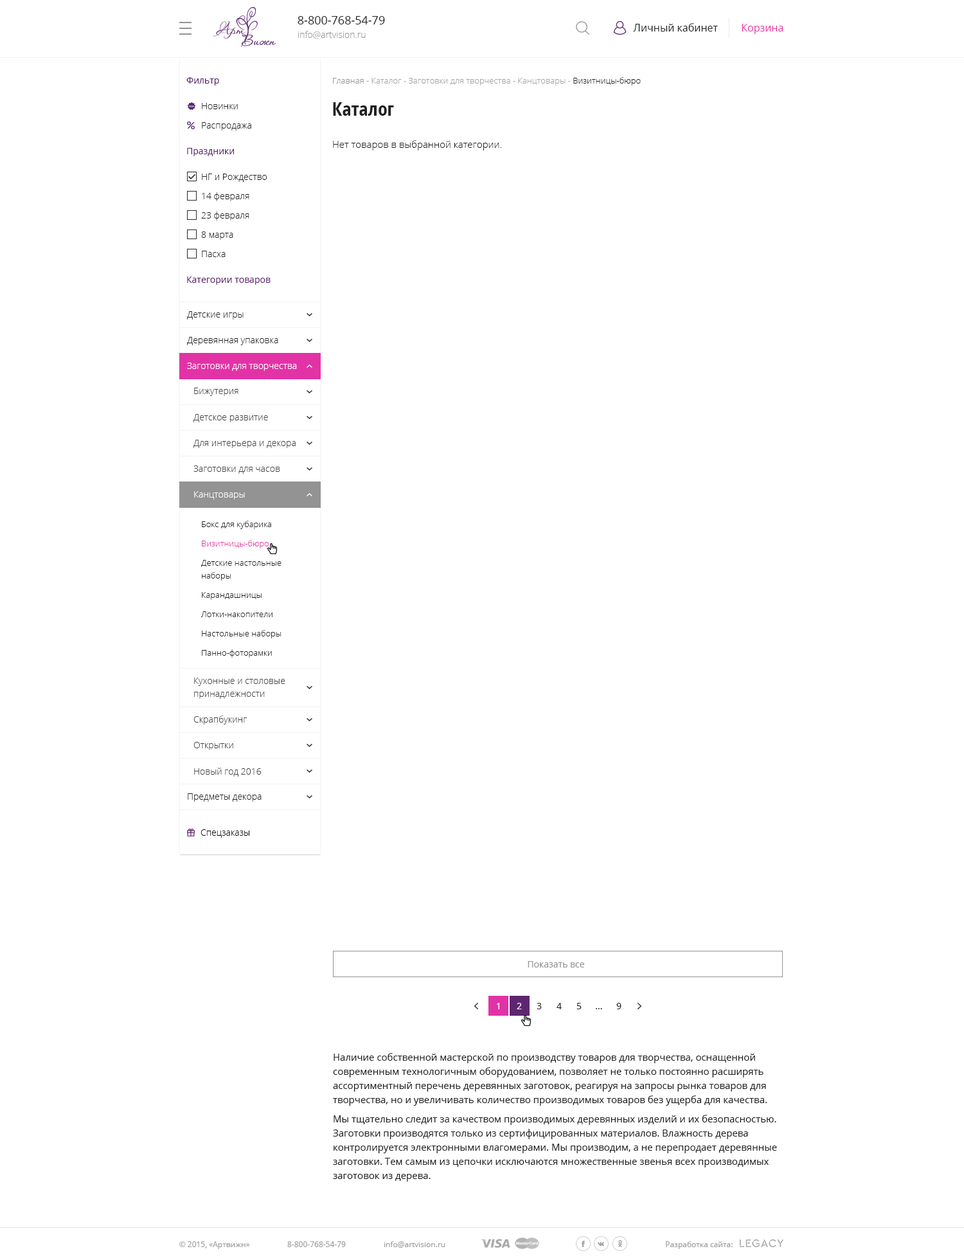
<style>
.page{position:relative;width:964px;height:1260px;background:#ffffff}
.page>*{position:absolute;margin:0}
.t1{font:11.6px "OpenSans";color:#202020}
.t2{font:10.3px "OpenSans";color:#202020}
.t3{font:10.3px "OpenSans";color:#e233a6}
.t4{font:9px "OpenSans-Light";color:#999999}
.t5{font:9px "OpenSans";color:#5e2670}
.t6{font:8.4px "OpenSans-Light";color:#a4a4a4}
.t7{font:8.4px "OpenSans-Light";color:#939393}
.t8{font:8.4px "OpenSans-Light";color:#202020}
.t9{font:9px "OpenSans-Light";color:#202020}
.t10{font:19.3px "OpenSans-CondensedBold";color:#202020}
.t11{font:9.6px "OpenSans-Light";color:#202020}
.t12{font:9px "OpenSans-Light";color:#ffffff}
.t13{font:9px "OpenSans-Light";color:#444444}
.t14{font:8.4px "OpenSans-Light";color:#e233a6}
.t15{font:8.4px/11.6px "OpenSans-Light";color:#202020}
.t16{font:8.4px/12.9px "OpenSans-Light";color:#202020}
.t17{font:9px/10.3px "OpenSans-Light";color:#444444}
.t18{font:9px/12.9px "OpenSans-Light";color:#444444}
.t19{font:9px "OpenSans-Light";color:#000000}
.t20{font:9px "OpenSans";color:#939393}
.t21{font:9px "OpenSans";color:#ffffff}
.t22{font:9px "OpenSans";color:#202020}
.t23{font:9.6px/14.1px "OpenSans";color:#202020}
.t24{font:9.6px/19.3px "OpenSans";color:#202020}
.t25{font:7.7px "OpenSans";color:#9e9d9d}
</style>
<div class="page">
<p class="t1" style="left:298px;top:16px;width:87px;height:8px">8-800-768-54-79</p>
<p class="t2" style="left:633px;top:23px;width:85px;height:9px">Личный кабинет</p>
<p class="t3" style="left:742px;top:24px;width:42px;height:10px">Корзина</p>
<p class="t4" style="left:298px;top:31px;width:68px;height:8px">info@artvision.ru</p>
<p class="t5" style="left:186px;top:77px;width:33px;height:9px">Фильтр</p>
<p class="t6" style="left:333px;top:77px;width:308px;height:9px"><span class="t7">Главная - </span>Каталог - Заготовки для творчества - Канцтовары - <span class="t8">Визитницы-бюро</span></p>
<p class="t9" style="left:202px;top:103px;width:36px;height:6px">Новинки</p>
<p class="t10" style="left:333px;top:102px;width:61px;height:14px">Каталог</p>
<p class="t9" style="left:202px;top:122px;width:49px;height:8px">Распродажа</p>
<p class="t5" style="left:187px;top:148px;width:47px;height:8px">Праздники</p>
<p class="t11" style="left:333px;top:140px;width:169px;height:10px">Нет товаров в выбранной категории.</p>
<p class="t9" style="left:202px;top:174px;width:65px;height:8px">НГ и Рождество</p>
<p class="t9" style="left:202px;top:192px;width:47px;height:9px">14 февраля</p>
<p class="t9" style="left:201px;top:212px;width:48px;height:9px">23 февраля</p>
<p class="t9" style="left:201px;top:231px;width:32px;height:9px">8 марта</p>
<p class="t9" style="left:202px;top:251px;width:24px;height:6px">Пасха</p>
<p class="t5" style="left:187px;top:276px;width:84px;height:9px">Категории товаров</p>
<p class="t9" style="left:187px;top:311px;width:57px;height:9px">Детские игры</p>
<p class="t9" style="left:187px;top:337px;width:91px;height:8px">Деревянная упаковка</p>
<p class="t12" style="left:187px;top:363px;width:110px;height:8px">Заготовки для творчества</p>
<p class="t13" style="left:194px;top:388px;width:45px;height:8px">Бижутерия</p>
<p class="t13" style="left:194px;top:414px;width:74px;height:8px">Детское развитие</p>
<p class="t13" style="left:194px;top:440px;width:102px;height:8px">Для интерьера и декора</p>
<p class="t13" style="left:194px;top:465px;width:86px;height:9px">Заготовки для часов</p>
<p class="t12" style="left:194px;top:491px;width:51px;height:9px">Канцтовары</p>
<p class="t8" style="left:202px;top:521px;width:69px;height:8px">Бокс для кубарика</p>
<p class="t14" style="left:202px;top:540px;width:67px;height:8px">Визитницы-бюро</p>
<p class="t15" style="left:201px;top:560px;width:81px;height:20px">Детские настольные<br><span class="t16">наборы</span></p>
<p class="t8" style="left:202px;top:592px;width:60px;height:8px">Карандашницы</p>
<p class="t8" style="left:201px;top:611px;width:72px;height:6px">Лотки-накопители</p>
<p class="t8" style="left:202px;top:630px;width:80px;height:8px">Настольные наборы</p>
<p class="t8" style="left:202px;top:649px;width:70px;height:9px">Панно-фоторамки</p>
<p class="t17" style="left:194px;top:678px;width:91px;height:21px">Кухонные и столовые<br><span class="t18">принадлежности</span></p>
<p class="t13" style="left:194px;top:716px;width:53px;height:8px">Скрапбукинг</p>
<p class="t13" style="left:194px;top:742px;width:39px;height:8px">Открытки</p>
<p class="t13" style="left:194px;top:768px;width:68px;height:9px">Новый год 2016</p>
<p class="t9" style="left:188px;top:793px;width:74px;height:9px">Предметы декора</p>
<p class="t19" style="left:201px;top:829px;width:48px;height:9px">Спецзаказы</p>
<p class="t20" style="left:528px;top:961px;width:56px;height:7px">Показать все</p>
<p class="t21" style="left:497px;top:1003px;width:3px;height:6px">1</p>
<p class="t21" style="left:517px;top:1003px;width:5px;height:6px">2</p>
<p class="t22" style="left:537px;top:1003px;width:5px;height:6px">3</p>
<p class="t22" style="left:557px;top:1003px;width:5px;height:6px">4</p>
<p class="t22" style="left:577px;top:1003px;width:5px;height:6px">5</p>
<p class="t22" style="left:596px;top:1008px;width:6px;height:1px">...</p>
<p class="t22" style="left:616px;top:1003px;width:6px;height:6px">9</p>
<p class="t23" style="left:333px;top:1053px;width:444px;height:129px">Наличие собственной мастерской по производству товаров для творчества, оснащенной<br>современным технологичным оборудованием, позволяет не только постоянно расширять<br>ассортиментный перечень деревянных заготовок, реагируя на запросы рынка товаров для<br>творчества, но и увеличивать количество производимых товаров без ущерба для качества.<br><span class="t24">Мы тщательно следит за качеством производимых деревянных изделий и их безопасностью.<br></span>Заготовки производятся только из сертифицированных материалов. Влажность дерева<br>контролируется электронными влагомерами. Мы производим, а не перепродает деревянные<br>заготовки. Тем самым из цепочки исключаются множественные звенья всех производимых заготовок из дерева.</p>
<p class="t25" style="left:179px;top:1241px;width:71px;height:8px">© 2015, «Артвижн»</p>
<p class="t25" style="left:287px;top:1241px;width:59px;height:6px">8-800-768-54-79</p>
<p class="t25" style="left:384px;top:1241px;width:62px;height:7px">info@artvision.ru</p>
<p class="t25" style="left:666px;top:1241px;width:67px;height:8px">Разработка сайта:</p>
</div>
